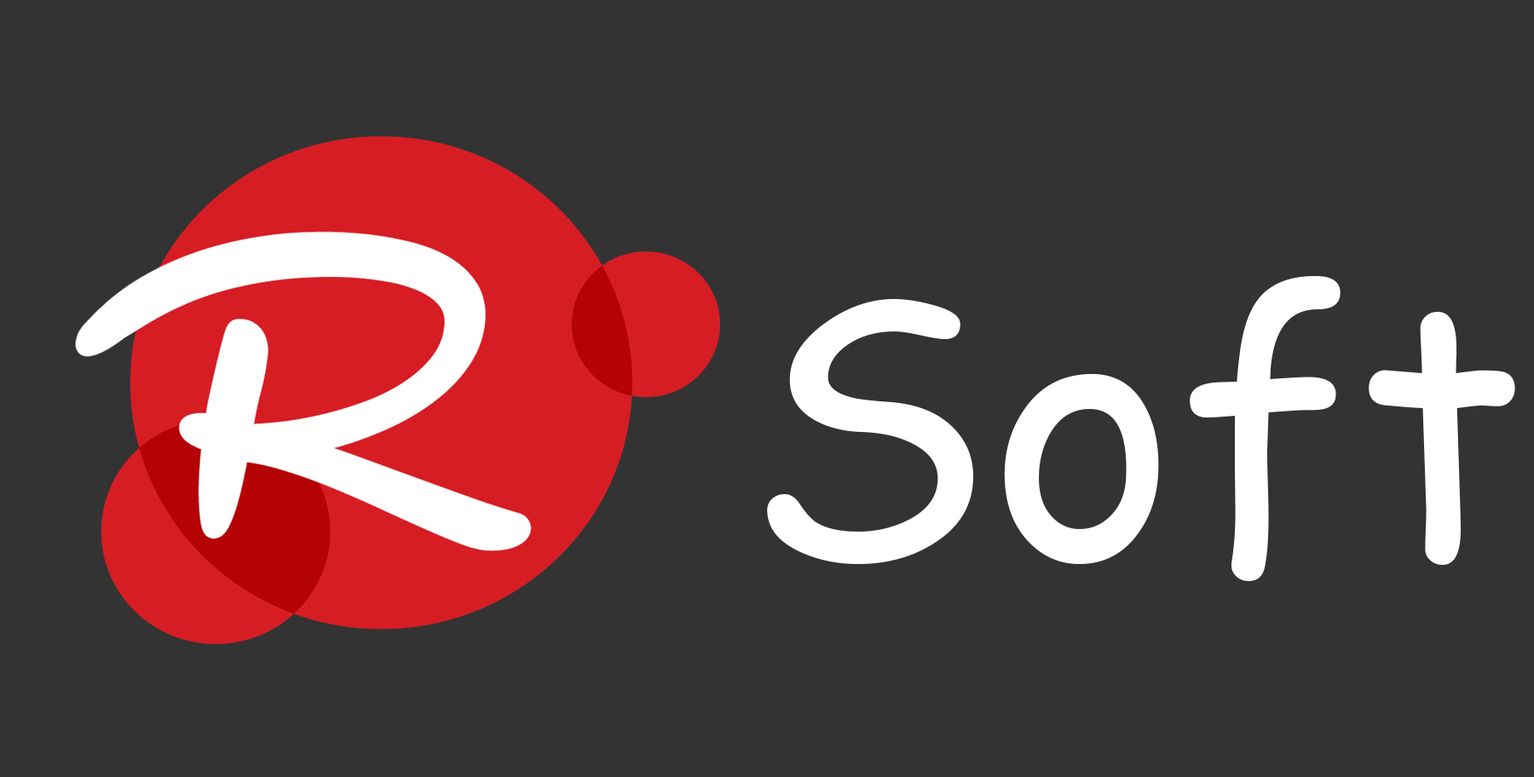
<style>
.page{position:relative;width:1534px;height:777px;background:#333333}
.page>*{position:absolute;margin:0}
.t1{font:355.1px "ComicSansMS";color:#ffffff}
</style>
<div class="page">
<p class="t1" style="left:767px;top:276px;width:748px;height:305px">Soft</p>
</div>
